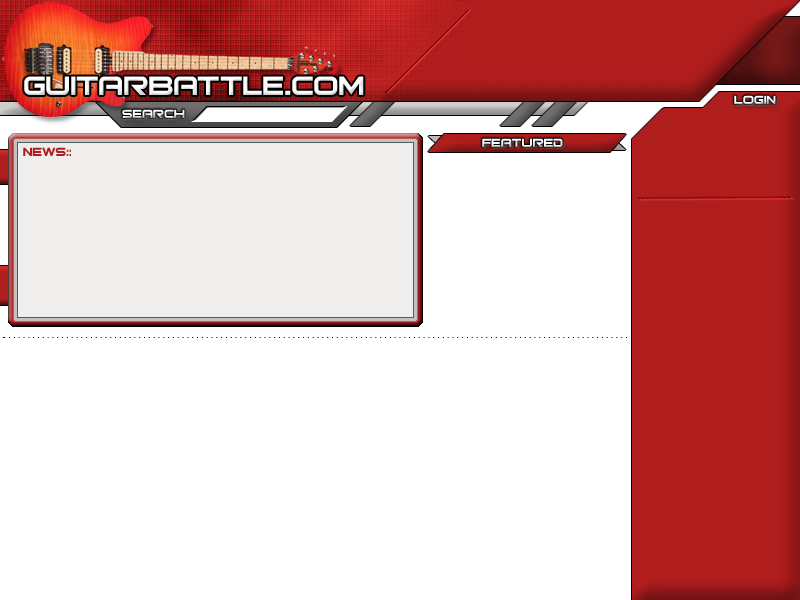
<style>
.page{position:relative;width:800px;height:600px;background:#ffffff}
.page>*{position:absolute;margin:0}
.t1{font:36px "Bitsumishi";color:#ffffff}
.t2{font:16px "Bitsumishi";color:#ffffff}
.t3{font:16px "Bitsumishi";color:#b01d1d}
.t4{font:16px "AstronBoy";color:#b01d1d}
</style>
<div class="page">
<p class="t1" style="left:24px;top:76px;width:340px;height:19px">guitarbattle.com</p>
<p class="t2" style="left:734px;top:95px;width:42px;height:9px">login</p>
<p class="t2" style="left:122px;top:109px;width:63px;height:9px">search</p>
<p class="t3" style="left:23px;top:147px;width:48px;height:9px">news<span class="t4">::</span></p>
<p class="t2" style="left:482px;top:138px;width:81px;height:9px">featured</p>
</div>
